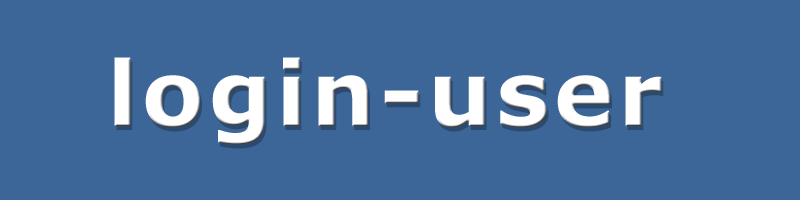
<style>
.page{position:relative;width:800px;height:200px;background:#3d6698}
.page>*{position:absolute;margin:0}
.t1{font:90px "Verdana-Bold";letter-spacing:0.05em;color:#ffffff}
</style>
<div class="page">
<p class="t1" style="left:114px;top:57px;width:548px;height:88px">login-user</p>
</div>
